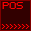
<style>
.page{position:relative;width:31px;height:31px;background:#320000}
.page>*{position:absolute;margin:0}
.t1{font:10px "rktr7rg";color:#ff0000}
</style>
<div class="page">
<p class="t1" style="left:2px;top:2px;width:21px;height:7px">POS</p>
</div>
